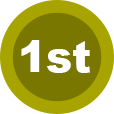
<style>
.page{position:relative;width:114px;height:114px;background:#7a7700}
.page>*{position:absolute;margin:0}
.t1{font:42.6px "Arial-Black";color:#ffffff}
</style>
<div class="page">
<p class="t1" style="left:21px;top:40px;width:69px;height:33px">1st</p>
</div>
